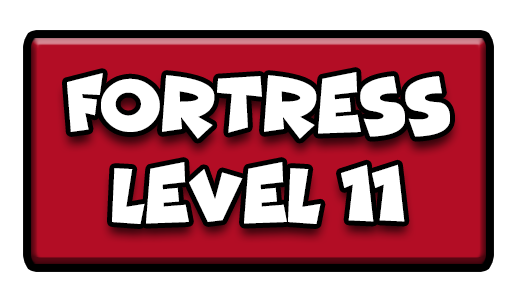
<style>
.page{position:relative;width:517px;height:301px;background:#ffffff}
.page>*{position:absolute;margin:0}
.t1{font:77.7px "Funhouse";color:#ffffff;scale:0.95 1}
</style>
<div class="page">
<p class="t1" style="left:67px;top:72px;width:383px;height:67px">FORTRESS</p>
<p class="t1" style="left:112px;top:162px;width:293px;height:62px">LEVEL 11</p>
</div>
